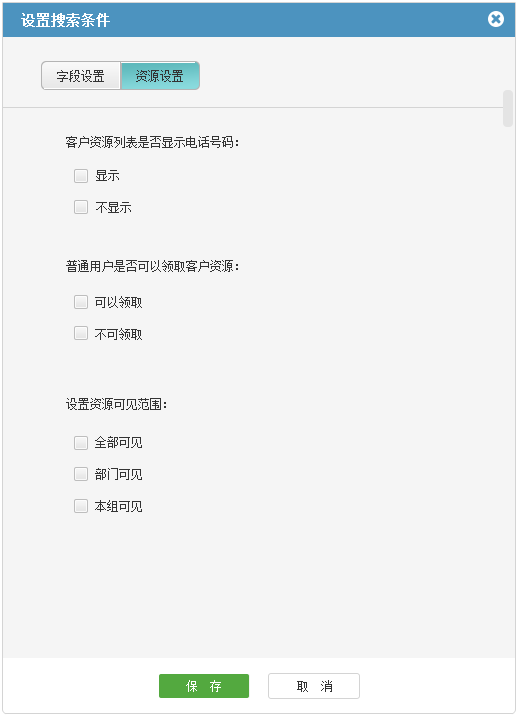
<style>
.page{position:relative;width:520px;height:715px;background:#f5f5f5}
.page>*{position:absolute;margin:0}
.t1{font:14px "SimSun";color:#ffffff;font-weight:bold}
.t2{font:12px "SimSun";color:#333333}
.t3{font:12px/32px "SimSun";color:#333333}
.t4{font:12px "SimSun";color:#ffffff}
</style>
<div class="page">
<p class="t1" style="left:21px;top:13px;width:89px;height:14px">设置搜索条件</p>
<p class="t2" style="left:57px;top:70px;width:47px;height:12px">字段设置</p>
<p class="t2" style="left:136px;top:70px;width:47px;height:12px">资源设置</p>
<p class="t2" style="left:66px;top:136px;width:172px;height:12px">客户资源列表是否显示电话号码：</p>
<p class="t3" style="left:96px;top:170px;width:35px;height:43px">显示         <br>不显示</p>
<p class="t2" style="left:66px;top:260px;width:172px;height:12px">普通用户是否可以领取客户资源：</p>
<p class="t3" style="left:95px;top:296px;width:47px;height:44px">可以领取     <br>不可领取</p>
<p class="t2" style="left:66px;top:398px;width:100px;height:12px">设置资源可见范围：</p>
<p class="t3" style="left:95px;top:436px;width:47px;height:76px">全部可见<br>部门可见<br>本组可见</p>
<p class="t4" style="left:186px;top:680px;width:35px;height:12px">保  存</p>
<p class="t2" style="left:297px;top:680px;width:35px;height:12px">取　消</p>
</div>
